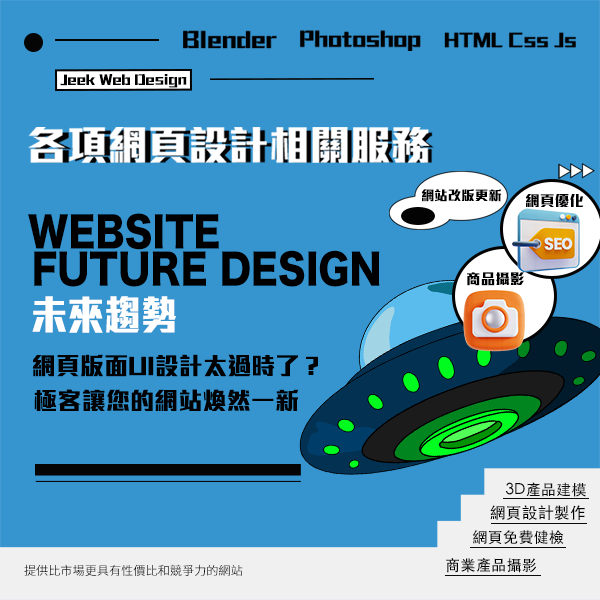
<style>
.page{position:relative;width:600px;height:600px;background:#3694cf}
.page>*{position:absolute;margin:0}
.t1{font:14.1px "MStiffHeiHK-UltraBold";color:#000000}
.t2{font:13.4px "MStiffHeiHK-UltraBold";color:#000000}
.t3{font:14.8px "MStiffHeiHK-UltraBold";color:#000000}
.t4{font:41.1px "HiraKakuStd-W8";color:#000000;scale:0.89 1}
.t5{font:41.1px "MStiffHeiHK-UltraBold";color:#ffffff;scale:0.89 1}
.t6{font:24.2px "MStiffHeiHK-UltraBold";color:#000000}
.t7{font:15.3px "STHeitiTC-Medium";color:#0b0b0b}
.t8{font:16px "STHeitiTC-Medium";color:#000000}
.t9{font:15.4px "STHeitiTC-Medium";color:#000000}
.t10{font:12.2px "SourceHanSansTW-Normal";color:#000000}
</style>
<div class="page">
<p class="t1" style="left:60px;top:74px;width:127px;height:14px">Jeek Web Design</p>
<p class="t2" style="left:422px;top:189px;width:80px;height:13px">網站改版更新</p>
<p class="t3" style="left:526px;top:194px;width:58px;height:13px">網頁優化</p>
<p class="t4" style="left:28px;top:213px;width:191px;height:37px">WEBSITE</p>
<p class="t4" style="left:34px;top:250px;width:346px;height:37px">FUTURE DESIGN</p>
<p class="t3" style="left:467px;top:272px;width:57px;height:14px">商品攝影</p>
<p class="t5" style="left:32px;top:296px;width:144px;height:37px">未來趨勢</p>
<p class="t6" style="left:33px;top:354px;width:285px;height:23px">網頁版面UI設計太過時了？</p>
<p class="t6" style="left:34px;top:389px;width:265px;height:22px">極客讓您的網站煥然一新</p>
<p class="t7" style="left:506px;top:482px;width:80px;height:15px">3D產品建模</p>
<p class="t8" style="left:490px;top:505px;width:95px;height:16px">網頁設計製作</p>
<p class="t9" style="left:472px;top:530px;width:92px;height:15px">網頁免費健檢</p>
<p class="t9" style="left:446px;top:558px;width:91px;height:15px">商業產品攝影</p>
<p class="t10" style="left:24px;top:564px;width:219px;height:12px">提供比市場更具有性價比和競爭力的網站</p>
</div>
